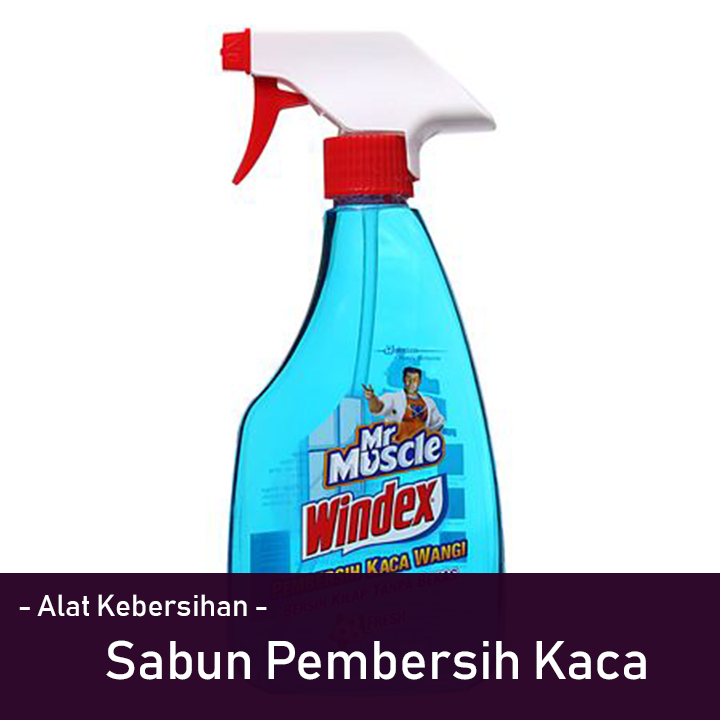
<style>
.page{position:relative;width:720px;height:720px;background:#ffffff}
.page>*{position:absolute;margin:0}
.t1{font:30px "Bahnschrift";color:#ffffff}
.t2{font:53.6px "Bahnschrift";color:#ffffff}
</style>
<div class="page">
<p class="t1" style="left:19px;top:594px;width:248px;height:23px">- Alat Kebersihan -</p>
<p class="t2" style="left:106px;top:640px;width:540px;height:40px">Sabun Pembersih Kaca</p>
</div>
